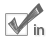
<style>
.page{position:relative;width:50px;height:40px;background:#ffffff}
.page>*{position:absolute;margin:0}
.t1{font:14px "KozGoPro-Medium";color:#666666}
</style>
<div class="page">
<p class="t1" style="left:33px;top:24px;width:11px;height:11px">in</p>
</div>
